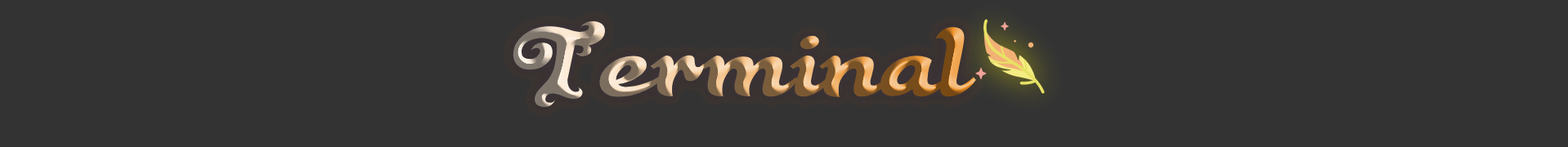
<style>
.page{position:relative;width:1568px;height:147px;background:#333333}
.page>*{position:absolute;margin:0}
.t1{font:108.8px "BlackRose";scale:1.2 1}
</style>
<div class="page">
<p class="t1" style="left:513px;top:21px;width:463px;height:86px">Terminal</p>
</div>
